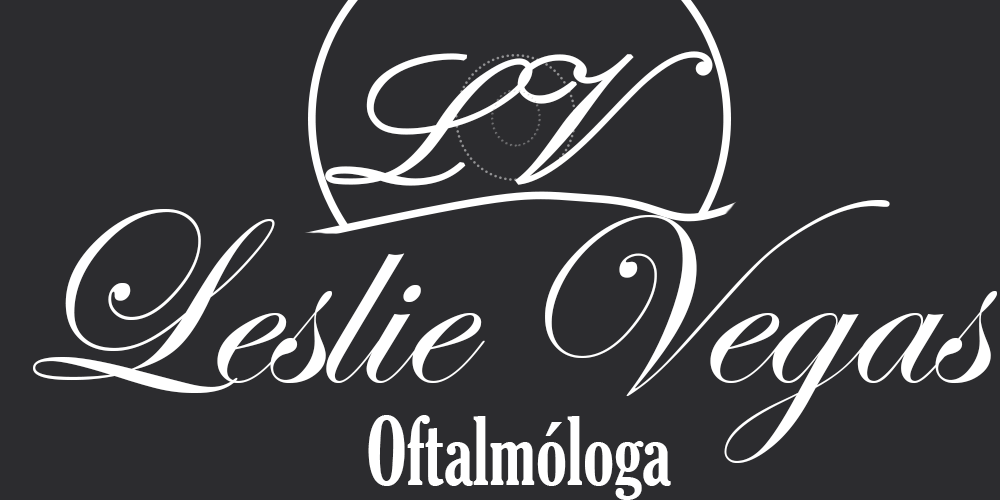
<style>
.page{position:relative;width:1000px;height:500px;background:#2c2c2f}
.page>*{position:absolute;margin:0}
.t1{font:182.9px "KunstlerScript";color:#ffffff;font-weight:bold}
.t2{font:254px "EdwardianScriptITC";color:#ffffff}
.t3{font:91.4px "GloucesterMT-ExtraCondensed";color:#ffffff}
</style>
<div class="page">
<p class="t1" style="left:325px;top:51px;width:388px;height:135px">LV</p>
<p class="t2" style="left:33px;top:200px;width:964px;height:263px">Leslie Vegas</p>
<p class="t3" style="left:368px;top:415px;width:303px;height:85px">Oftalmóloga</p>
</div>
